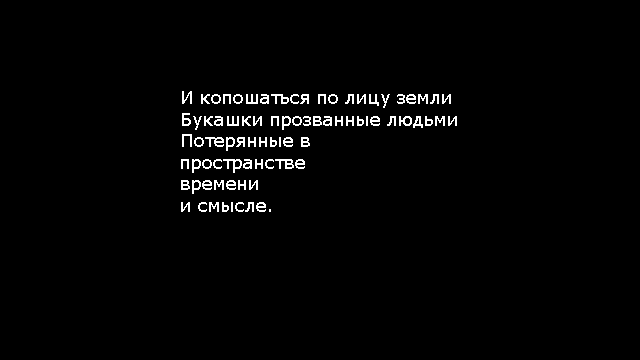
<style>
.page{position:relative;width:640px;height:360px;background:#000000}
.page>*{position:absolute;margin:0}
.t1{font:18px "Verdana";color:#ffffff}
</style>
<div class="page">
<p class="t1" style="left:181px;top:91px;width:276px;height:121px;text-align:right">И копошаться по лицу земли<br>Букашки прозванные людьми<br>Потерянные в <br>пространстве<br>времени <br>и смысле.</p>
</div>
